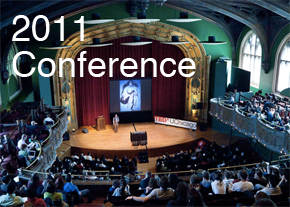
<style>
.page{position:relative;width:290px;height:207px}
.page>*{position:absolute;margin:0}
.t1{font:36px/36px "Helvetica";color:#ffffff}
</style>
<div class="page">
<p class="t1" style="left:12px;top:15px;width:184px;height:62px">2011<br>Conference</p>
</div>
